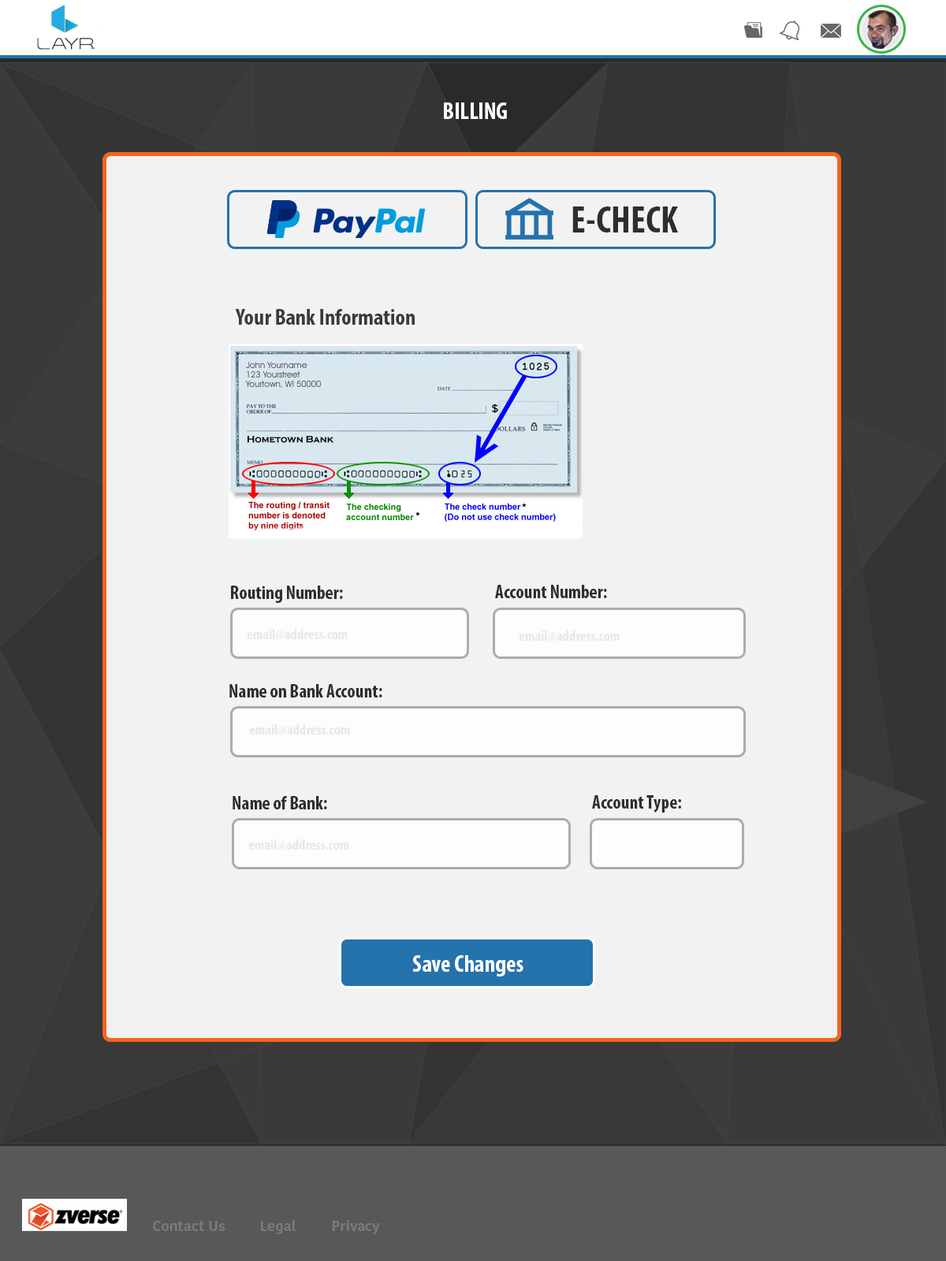
<style>
.page{position:relative;width:946px;height:1261px;background:#f3f2f2}
.page>*{position:absolute;margin:0}
.t1{font:23.6px "MyriadPro-BoldCond";color:#fffefe}
.t2{font:37.8px "MyriadPro-BoldCond";color:#2e2e2e}
.t3{font:22.9px "MyriadPro-BoldCond";color:#383a3b}
.t4{font:18.9px "MyriadPro-BoldCond";color:#2e2e2e}
.t5{font:14.2px "KohinoorDevanagari-Medium";color:#7a7b7c}
</style>
<div class="page">
<p class="t1" style="left:444px;top:102px;width:63px;height:17px">BILLING</p>
<p class="t2" style="left:572px;top:206px;width:106px;height:26px">E-CHECK</p>
<p class="t3" style="left:235px;top:309px;width:180px;height:16px">Your Bank Information</p>
<p class="t4" style="left:231px;top:586px;width:112px;height:17px">Routing Number:</p>
<p class="t4" style="left:495px;top:585px;width:112px;height:13px">Account Number:</p>
<p class="t4" style="left:229px;top:684px;width:153px;height:13px">Name on Bank Account:</p>
<p class="t4" style="left:232px;top:796px;width:95px;height:13px">Name of Bank:</p>
<p class="t4" style="left:592px;top:795px;width:89px;height:18px">Account Type:</p>
<p class="t1" style="left:412px;top:955px;width:111px;height:21px">Save Changes</p>
<p class="t5" style="left:153px;top:1220px;width:227px;height:14px">Contact Us  Legal   Privacy Policy</p>
</div>
